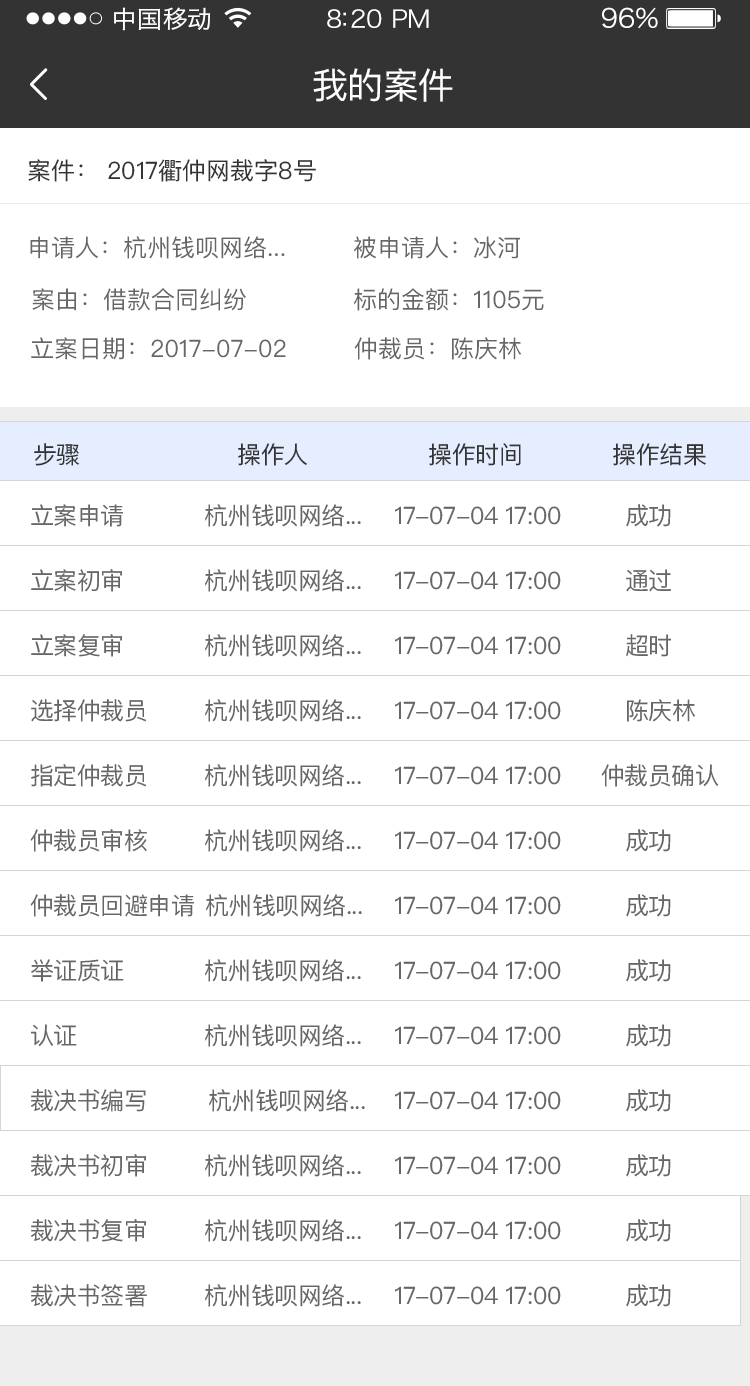
<style>
.page{position:relative;width:750px;height:1386px;background:#ffffff}
.page>*{position:absolute;margin:0}
.t1{font:24px "HiraginoSansGB-W3";letter-spacing:0.02em;color:#ffffff;scale:1.03 1}
.t2{font:24px "HiraginoSansGB-W3";letter-spacing:-0.02em;color:#ffffff;scale:1.03 1}
.t3{font:26.2px "HiraginoSansGB-W3";letter-spacing:-0.02em;color:#ffffff;scale:1.03 1}
.t4{font:36px "PingFangSC-Regular";letter-spacing:-0.02em;color:#ffffff}
.t5{font:24px "PingFangSC-Regular";color:#333333}
.t6{font:24px "PingFangSC-Regular";color:#666666}
.t7{font:24px "PingFangSC-Regular";letter-spacing:-0.02em;color:#333333}
.t8{font:24px "PingFangSC-Regular";letter-spacing:-0.02em;color:#666666}
</style>
<div class="page">
<p class="t1" style="left:114px;top:7px;width:97px;height:24px">中国移动</p>
<p class="t2" style="left:327px;top:9px;width:102px;height:19px">8:20 PM</p>
<p class="t3" style="left:602px;top:7px;width:56px;height:22px">96%</p>
<p class="t4" style="left:313px;top:68px;width:140px;height:34px">我的案件</p>
<p class="t5" style="left:28px;top:159px;width:288px;height:23px">案件： 2017衢仲网裁字8号</p>
<p class="t6" style="left:30px;top:236px;width:255px;height:23px">申请人：杭州钱呗网络...</p>
<p class="t6" style="left:354px;top:236px;width:166px;height:23px">被申请人：冰河</p>
<p class="t6" style="left:32px;top:288px;width:214px;height:23px">案由：借款合同纠纷</p>
<p class="t6" style="left:354px;top:288px;width:190px;height:23px">标的金额：1105元</p>
<p class="t6" style="left:31px;top:337px;width:255px;height:23px">立案日期：2017-07-02</p>
<p class="t6" style="left:354px;top:337px;width:167px;height:23px">仲裁员：陈庆林</p>
<p class="t7" style="left:34px;top:443px;width:672px;height:23px">步骤                     操作人                操作时间            操作结果</p>
<p class="t8" style="left:31px;top:504px;width:92px;height:23px">立案申请</p>
<p class="t8" style="left:205px;top:504px;width:156px;height:23px">杭州钱呗网络...</p>
<p class="t8" style="left:395px;top:506px;width:166px;height:19px">17-07-04 17:00</p>
<p class="t8" style="left:626px;top:504px;width:45px;height:23px">成功</p>
<p class="t8" style="left:31px;top:569px;width:91px;height:23px">立案初审</p>
<p class="t8" style="left:205px;top:569px;width:156px;height:23px">杭州钱呗网络...</p>
<p class="t8" style="left:626px;top:569px;width:45px;height:23px">通过</p>
<p class="t8" style="left:395px;top:571px;width:166px;height:19px">17-07-04 17:00</p>
<p class="t8" style="left:31px;top:634px;width:91px;height:23px">立案复审</p>
<p class="t8" style="left:205px;top:634px;width:156px;height:23px">杭州钱呗网络...</p>
<p class="t8" style="left:395px;top:636px;width:166px;height:19px">17-07-04 17:00</p>
<p class="t8" style="left:626px;top:634px;width:45px;height:23px">超时</p>
<p class="t8" style="left:31px;top:699px;width:116px;height:23px">选择仲裁员</p>
<p class="t8" style="left:205px;top:699px;width:156px;height:23px">杭州钱呗网络...</p>
<p class="t8" style="left:395px;top:701px;width:166px;height:19px">17-07-04 17:00</p>
<p class="t8" style="left:627px;top:699px;width:68px;height:23px">陈庆林</p>
<p class="t8" style="left:31px;top:764px;width:116px;height:23px">指定仲裁员</p>
<p class="t8" style="left:205px;top:764px;width:156px;height:23px">杭州钱呗网络...</p>
<p class="t8" style="left:395px;top:766px;width:166px;height:19px">17-07-04 17:00</p>
<p class="t8" style="left:601px;top:764px;width:118px;height:23px">仲裁员确认</p>
<p class="t8" style="left:30px;top:829px;width:117px;height:23px">仲裁员审核</p>
<p class="t8" style="left:205px;top:829px;width:156px;height:23px">杭州钱呗网络...</p>
<p class="t8" style="left:395px;top:831px;width:166px;height:19px">17-07-04 17:00</p>
<p class="t8" style="left:626px;top:829px;width:45px;height:23px">成功</p>
<p class="t8" style="left:30px;top:894px;width:164px;height:23px">仲裁员回避申请</p>
<p class="t8" style="left:206px;top:894px;width:156px;height:23px">杭州钱呗网络...</p>
<p class="t8" style="left:626px;top:894px;width:45px;height:23px">成功</p>
<p class="t8" style="left:395px;top:896px;width:166px;height:19px">17-07-04 17:00</p>
<p class="t8" style="left:31px;top:959px;width:93px;height:23px">举证质证</p>
<p class="t8" style="left:205px;top:959px;width:156px;height:23px">杭州钱呗网络...</p>
<p class="t8" style="left:395px;top:961px;width:166px;height:19px">17-07-04 17:00</p>
<p class="t8" style="left:626px;top:959px;width:45px;height:23px">成功</p>
<p class="t8" style="left:31px;top:1024px;width:46px;height:23px">认证</p>
<p class="t8" style="left:205px;top:1024px;width:156px;height:23px">杭州钱呗网络...</p>
<p class="t8" style="left:626px;top:1024px;width:45px;height:23px">成功</p>
<p class="t8" style="left:395px;top:1026px;width:166px;height:19px">17-07-04 17:00</p>
<p class="t8" style="left:30px;top:1089px;width:116px;height:23px">裁决书编写</p>
<p class="t8" style="left:209px;top:1089px;width:156px;height:23px">杭州钱呗网络...</p>
<p class="t8" style="left:395px;top:1091px;width:166px;height:19px">17-07-04 17:00</p>
<p class="t8" style="left:626px;top:1089px;width:45px;height:23px">成功</p>
<p class="t8" style="left:30px;top:1154px;width:116px;height:23px">裁决书初审</p>
<p class="t8" style="left:205px;top:1154px;width:156px;height:23px">杭州钱呗网络...</p>
<p class="t8" style="left:395px;top:1156px;width:166px;height:19px">17-07-04 17:00</p>
<p class="t8" style="left:626px;top:1154px;width:45px;height:23px">成功</p>
<p class="t8" style="left:30px;top:1219px;width:116px;height:23px">裁决书复审</p>
<p class="t8" style="left:205px;top:1219px;width:156px;height:23px">杭州钱呗网络...</p>
<p class="t8" style="left:395px;top:1221px;width:166px;height:19px">17-07-04 17:00</p>
<p class="t8" style="left:626px;top:1219px;width:45px;height:23px">成功</p>
<p class="t8" style="left:30px;top:1284px;width:117px;height:23px">裁决书签署</p>
<p class="t8" style="left:205px;top:1284px;width:156px;height:23px">杭州钱呗网络...</p>
<p class="t8" style="left:395px;top:1286px;width:166px;height:19px">17-07-04 17:00</p>
<p class="t8" style="left:626px;top:1284px;width:45px;height:23px">成功</p>
</div>
